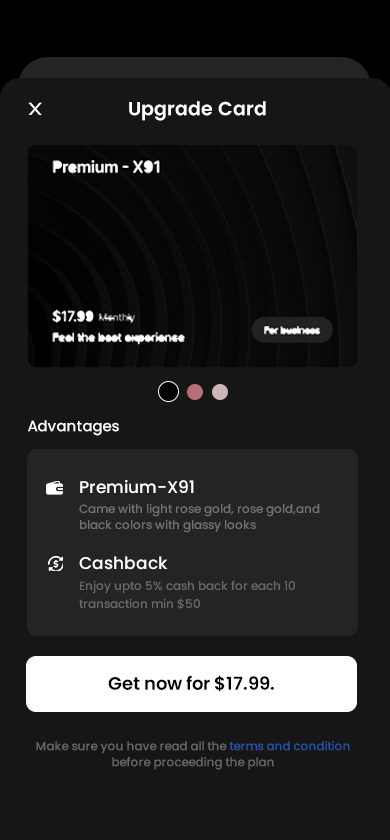
<style>
.page{position:relative;width:390px;height:840px;background:#161616}
.page>*{position:absolute;margin:0}
.t1{font:17.5px "Poppins-Regular";color:#ffffff;scale:1.41 1}
.t2{font:19px "Poppins-SemiBold";color:#ffffff}
.t3{font:15px "Poppins-Medium";color:#ffffff}
.t4{font:12px/10px "Poppins-Medium";color:#686868}
.t5{font:17px/10px "Poppins-Medium";color:#ffffff}
.t6{font:12px/10px "Poppins-Medium";color:#727272}
.t7{font:12px/16px "Poppins-Medium";color:#727272}
.t8{font:18px "Poppins-SemiBold";color:#000000}
.t9{font:12px/16px "Poppins-Medium";color:#676767}
.t10{font:12px/16px "Poppins-Medium";color:#2352ad}
</style>
<div class="page">
<p class="t1" style="left:28px;top:102px;width:14px;height:13px">X</p>
<p class="t2" style="left:129px;top:101px;width:137px;height:20px">Upgrade Card</p>
<p class="t3" style="left:28px;top:420px;width:91px;height:16px">Advantages</p>
<p class="t4" style="left:79px;top:480px;width:241px;height:129px"><span class="t5">Premium-X91<br><br></span><span class="t6">Came with light rose gold, rose gold,and black </span><span class="t7">colors with glassy looks<br><br><br><br></span><span class="t5">Cashback<br><br></span>Enjoy upto 5% cash back for each 10 <br>transaction min $50</p>
<p class="t8" style="left:108px;top:675px;width:166px;height:17px">Get now for $17.99.</p>
<p class="t9" style="left:36px;top:741px;width:314px;height:29px;text-align:center">Make sure you have read all the <span class="t10">terms and condition   </span>before proceeding the plan</p>
</div>
